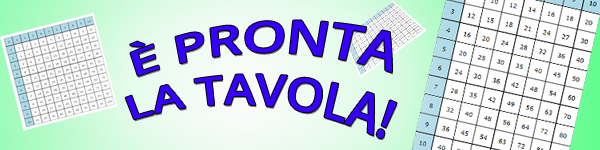
<style>
.page{position:relative;width:600px;height:150px}
.page>*{position:absolute;margin:0}
.t1{font:44px "OpenSans-Semibold";color:#3600ff}
</style>
<div class="page">
<p class="t1" style="left:125px;top:20px;width:272px;height:118px;text-align:center">È PRONTA<br>LA TAVOLA!</p>
</div>
